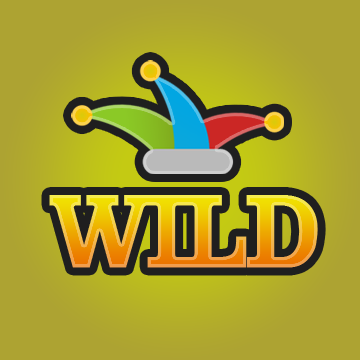
<style>
.page{position:relative;width:360px;height:360px;background:#ada332}
.page>*{position:absolute;margin:0}
.t1{font:97.9px "Clarendon-Bold";letter-spacing:-0.02em;font-weight:bold;scale:0.81 1}
</style>
<div class="page">
<p class="t1" style="left:49px;top:195px;width:269px;height:73px">WILD</p>
</div>
